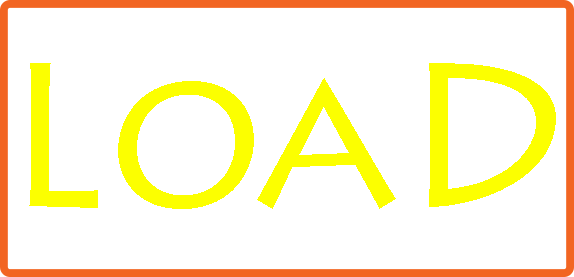
<style>
.page{position:relative;width:574px;height:277px;background:#ffffff}
.page>*{position:absolute;margin:0}
.t1{font:204.7px "LithosPro-Regular";color:#fcff00}
</style>
<div class="page">
<p class="t1" style="left:29px;top:63px;width:527px;height:146px">LoaD</p>
</div>
